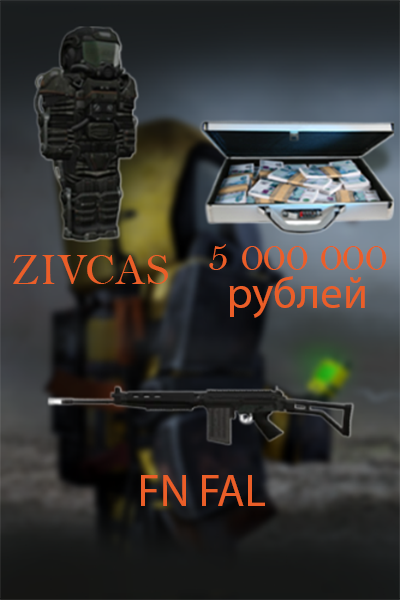
<style>
.page{position:relative;width:400px;height:600px}
.page>*{position:absolute;margin:0}
.t1{font:45px/38.3px "BellMT";color:#eb5e28}
.t2{font:45px/38.3px "MyriadPro-Regular";color:#eb5e28}
.t3{font:45px "BellMT";color:#eb5e28}
.t4{font:45px "MyriadPro-Regular";color:#eb5e28}
</style>
<div class="page">
<p class="t1" style="left:209px;top:244px;width:178px;height:74px;text-align:center">5 000 000<br><span class="t2">рублей</span></p>
<p class="t3" style="left:13px;top:255px;width:155px;height:29px">ZIVCAS</p>
<p class="t4" style="left:141px;top:475px;width:124px;height:31px">FN FAL</p>
</div>
